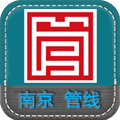
<style>
.page{position:relative;width:120px;height:120px}
.page>*{position:absolute;margin:0}
.t1{font:18.3px "STHeitiSC-Light";color:#03b6ff}
</style>
<div class="page">
<p class="t1" style="left:19px;top:90px;width:82px;height:19px">南京  管线</p>
</div>
